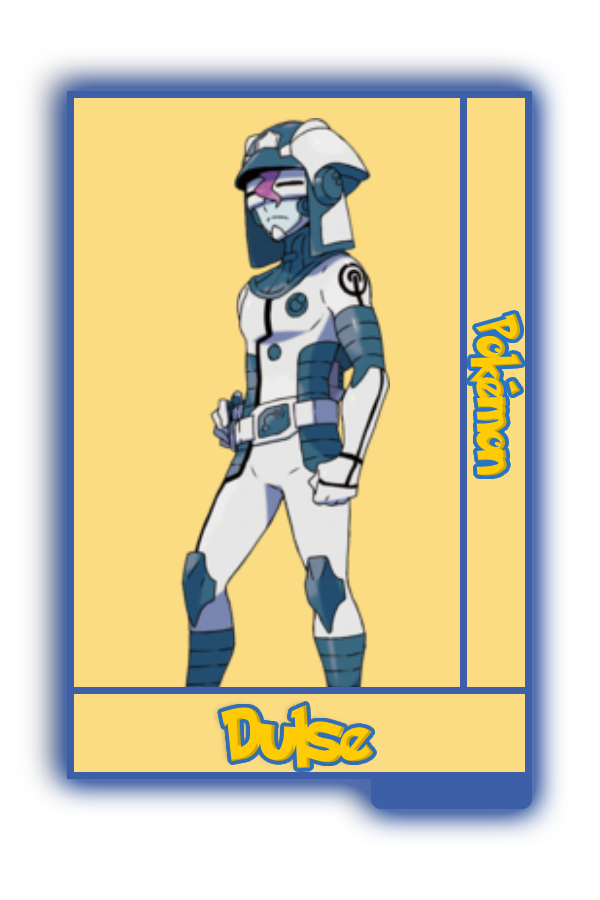
<style>
.page{position:relative;width:600px;height:900px;background:#fbdc83}
.page>*{position:absolute;margin:0}
.t1{font:48.8px "PokemonSolidNormal";color:#ffcb05;scale:0.8 1}
.t2{font:60.1px "PokemonSolidNormal";color:#ffcb05;scale:0.96 1}
</style>
<div class="page">
<p class="t1" style="left:469px;top:313px;width:54px;height:163px;rotate:90deg">Pokémon</p>
<p class="t2" style="left:221px;top:704px;width:153px;height:65px">Dulse</p>
</div>
